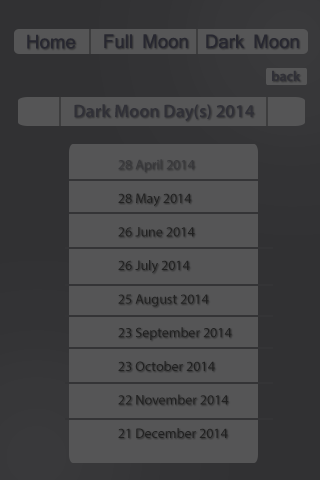
<style>
.page{position:relative;width:320px;height:480px;background:#555556}
.page>*{position:absolute;margin:0}
.t1{font:18px "Mangal";color:#272730}
.t2{font:14px "MyriadPro-Semibold";color:#303037}
.t3{font:18px "MyriadPro-Semibold";color:#303037}
.t4{font:14px "MyriadPro-Regular";color:#212121}
.t5{font:14px "MyriadPro-Regular";color:#38383b}
</style>
<div class="page">
<p class="t1" style="left:27px;top:34px;width:49px;height:15px">Home</p>
<p class="t1" style="left:104px;top:34px;width:84px;height:15px">Full Moon</p>
<p class="t1" style="left:206px;top:34px;width:93px;height:15px">Dark Moon</p>
<p class="t2" style="left:272px;top:70px;width:29px;height:12px">back</p>
<p class="t3" style="left:74px;top:104px;width:180px;height:17px">Dark Moon Day(s) 2014</p>
<p class="t4" style="left:118px;top:159px;width:114px;height:279px"><span class="t5"><br>    28 April 2014<br><br>    </span>28 May 2014<br><br>    26 June 2014<br><br>    26 July 2014<br><br>    25 August 2014<br><br>    23 September 2014<br><br>    23 October 2014<br><br>    22 November 2014<br><br>    21 December 2014</p>
</div>
